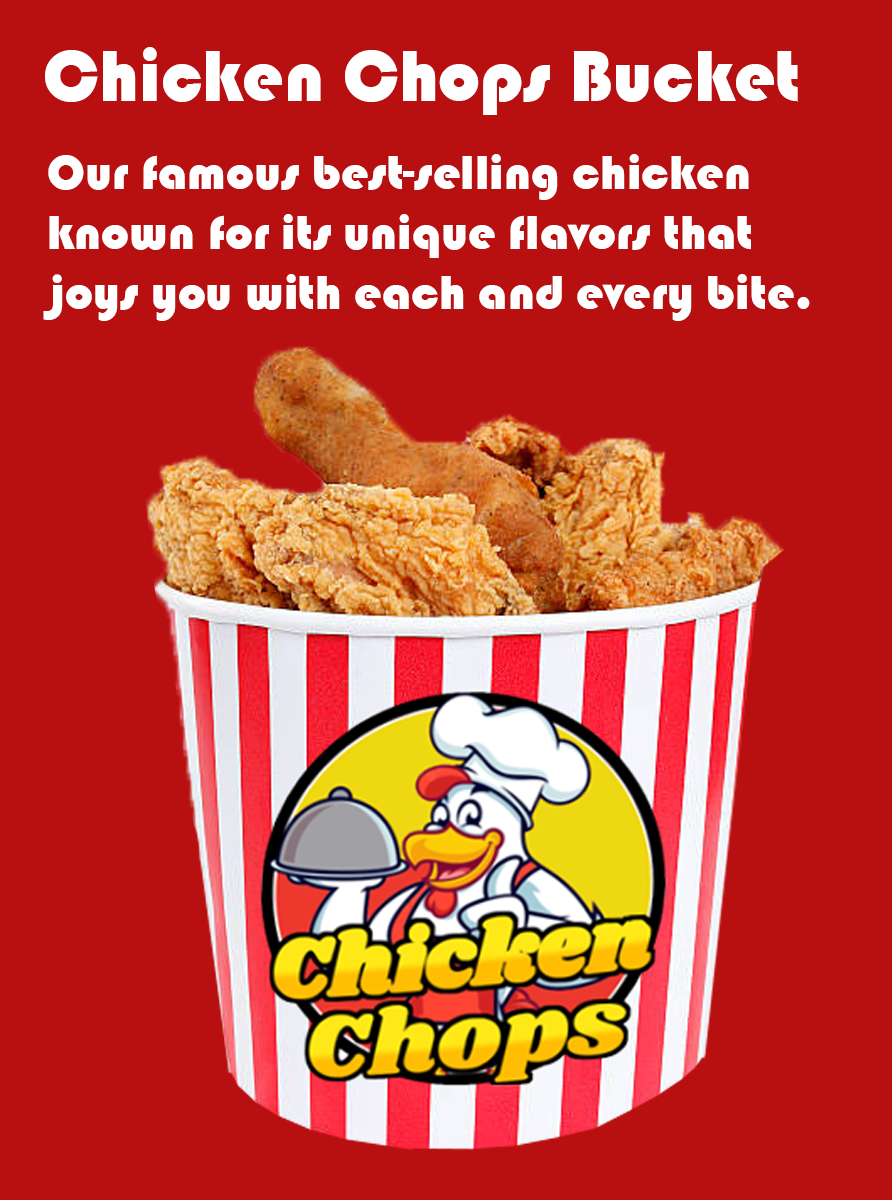
<style>
.page{position:relative;width:892px;height:1200px;background:#b81010}
.page>*{position:absolute;margin:0}
.t1{font:74.8px "Bauhaus93";color:#ffffff}
.t2{font:50px "Bauhaus93";color:#ffffff}
</style>
<div class="page">
<p class="t1" style="left:45px;top:47px;width:753px;height:68px">Chicken Chops Bucket</p>
<p class="t2" style="left:43px;top:154px;width:767px;height:167px">Our famous best-selling chicken<br>known for its unique flavors that<br>joys you with each and every bite.</p>
</div>
